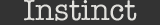
<style>
.page{position:relative;width:160px;height:25px;background:#333333}
.page>*{position:absolute;margin:0}
.t1{font:30px "AmericanTypewriter";color:#e2e1dd}
</style>
<div class="page">
<p class="t1" style="left:24px;top:0px;width:113px;height:21px">Instinct</p>
</div>
